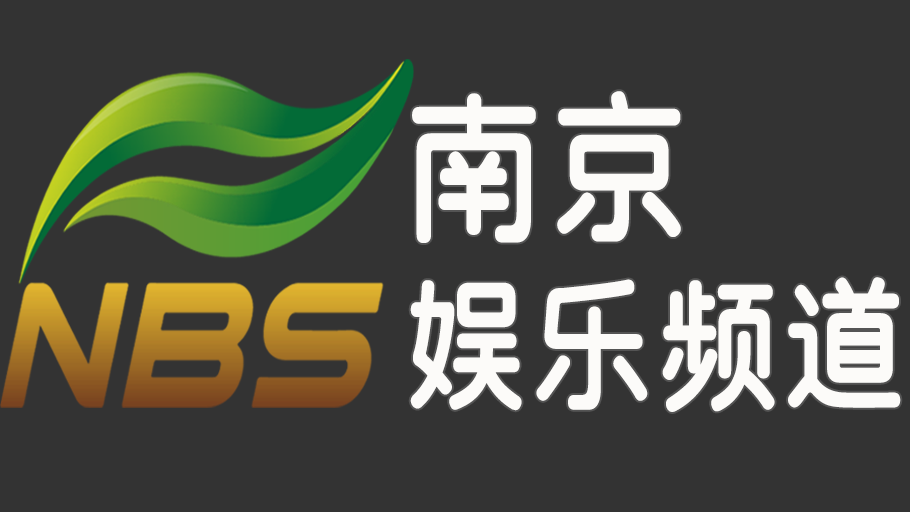
<style>
.page{position:relative;width:910px;height:512px;background:#333333}
.page>*{position:absolute;margin:0}
.t1{font:145.8px/187.5px "SJyuantijian-C-Regular";letter-spacing:0.02em;color:#fcfbf9;scale:0.85 1}
.t2{font:166.7px/187.5px "SJyuantijian-C-Regular";letter-spacing:0.02em;color:#fcfbf9;scale:0.85 1}
</style>
<div class="page">
<p class="t1" style="left:410px;top:91px;width:491px;height:321px"><span class="t2">南京<br></span>娱乐频道</p>
</div>
